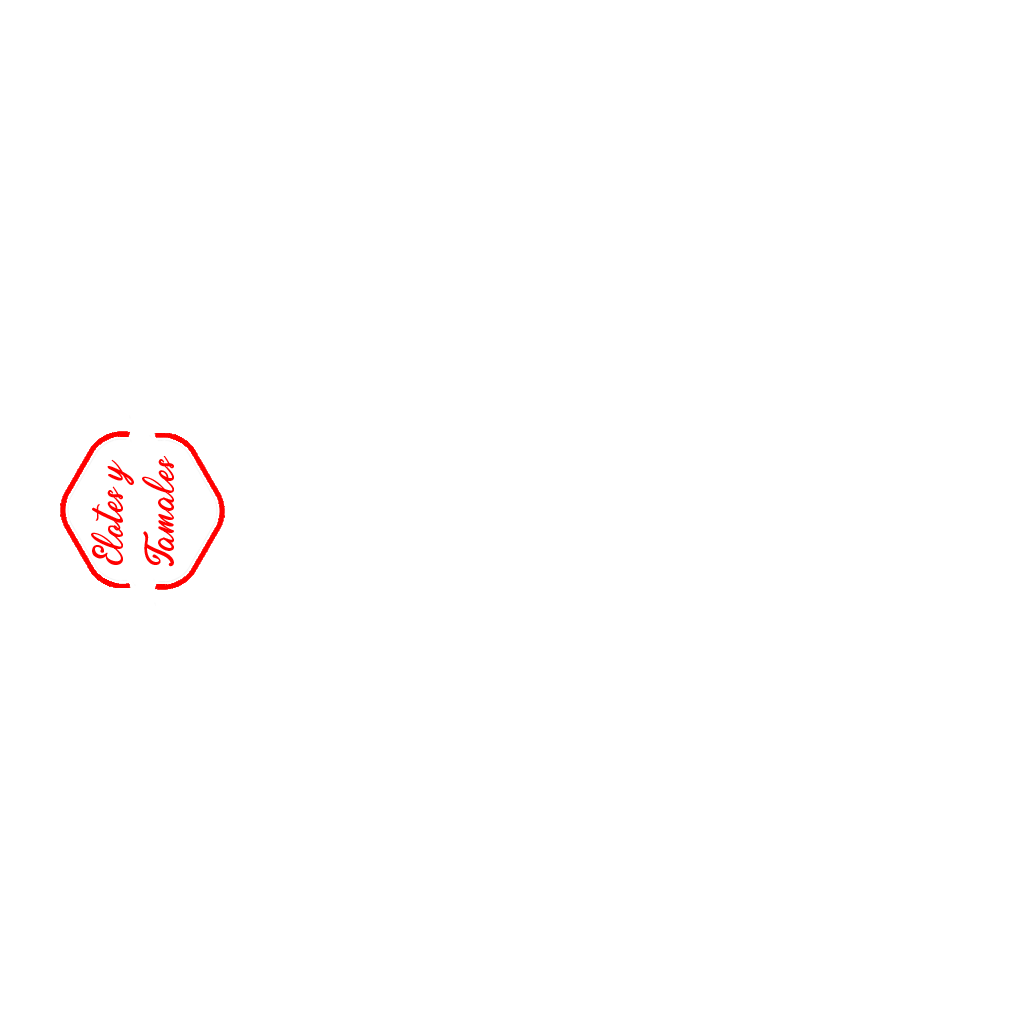
<style>
.page{position:relative;width:1024px;height:1024px;background:#ffffff}
.page>*{position:absolute;margin:0}
.t1{font:42.6px "Endolitta";color:#ff0000}
</style>
<div class="page">
<p class="t1" style="left:91px;top:456px;width:83px;height:111px;text-align:center;rotate:-90deg">Elotes y<br>Tamales</p>
</div>
